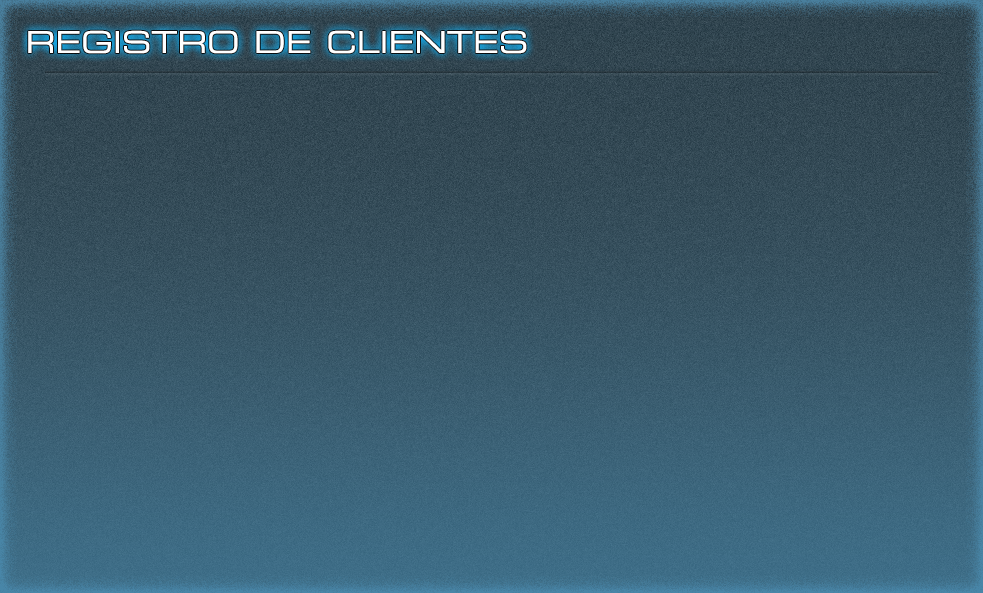
<style>
.page{position:relative;width:983px;height:593px}
.page>*{position:absolute;margin:0}
.t1{font:30px "Eurostile-ExtendedTwo";color:#ffffff}
</style>
<div class="page">
<p class="t1" style="left:28px;top:30px;width:499px;height:24px">REGISTRO DE CLIENTES</p>
</div>
